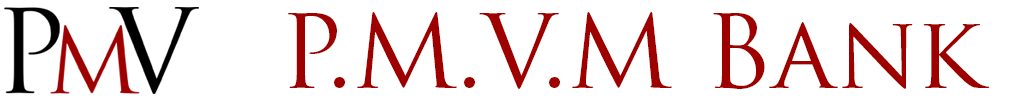
<style>
.page{position:relative;width:1024px;height:100px;background:#ffffff}
.page>*{position:absolute;margin:0}
.t1{font:100px "TrajanPro-Regular";color:#9e0000}
</style>
<div class="page">
<p class="t1" style="left:288px;top:12px;width:702px;height:77px">P.M.V.M Bank</p>
</div>
